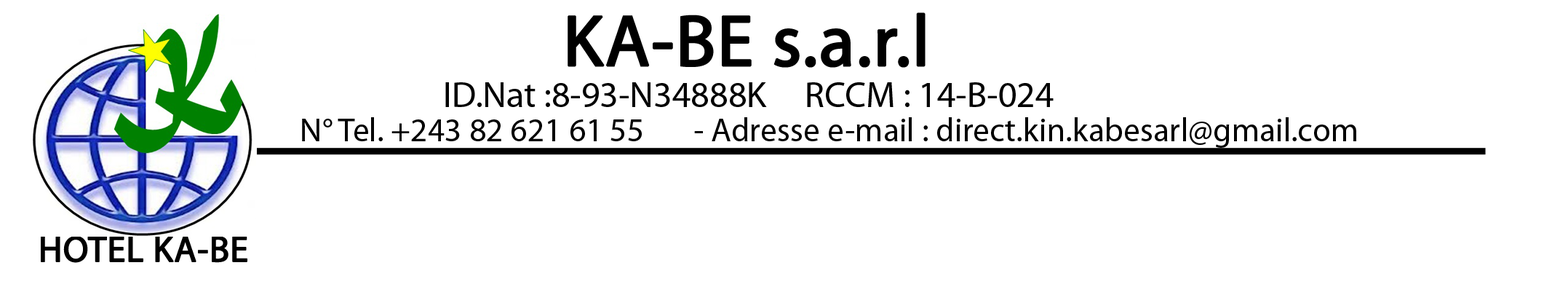
<style>
.page{position:relative;width:1568px;height:284px;background:#ffffff}
.page>*{position:absolute;margin:0}
.t1{font:72.8px "MyriadPro-Regular";color:#000000;font-weight:bold}
.t2{font:36.4px "MyriadPro-Regular";color:#000000}
.t3{font:33.3px "MyriadPro-Regular";color:#000000}
.t4{font:36.4px "MyriadPro-Regular";color:#000000;font-weight:bold}
</style>
<div class="page">
<p class="t1" style="left:568px;top:12px;width:358px;height:56px">KA-BE s.a.r.l</p>
<p class="t2" style="left:445px;top:82px;width:609px;height:25px">ID.Nat :8-93-N34888K     RCCM : 14-B-024</p>
<p class="t3" style="left:302px;top:117px;width:1054px;height:31px">N° Tel. +243 82 621 61 55       - Adresse e-mail : direct.kin.kabesarl@gmail.com</p>
<p class="t4" style="left:41px;top:236px;width:206px;height:27px">HOTEL KA-BE</p>
</div>
